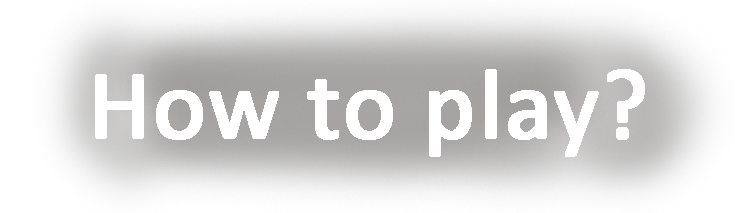
<style>
.page{position:relative;width:735px;height:213px}
.page>*{position:absolute;margin:0}
.t1{font:100px "Calibri";color:#ffffff;font-weight:bold}
</style>
<div class="page">
<p class="t1" style="left:95px;top:69px;width:550px;height:88px">How to play?</p>
</div>
